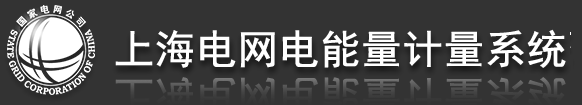
<style>
.page{position:relative;width:582px;height:105px;background:#333333}
.page>*{position:absolute;margin:0}
.t1{font:40.2px "SimHei";color:#ffffff;font-weight:bold}
</style>
<div class="page">
<p class="t1" style="left:115px;top:29px;width:451px;height:39px">上海电网电能量计量系统</p>
</div>
